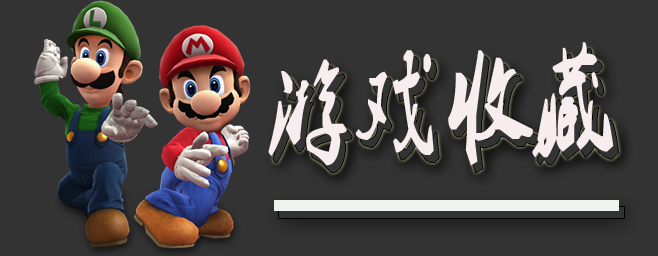
<style>
.page{position:relative;width:658px;height:256px;background:#333333}
.page>*{position:absolute;margin:0}
.t1{font:120.6px "2.0-";letter-spacing:0.1em;color:#f7edee;scale:0.67 1}
</style>
<div class="page">
<p class="t1" style="left:268px;top:42px;width:346px;height:124px">游戏收藏</p>
</div>
